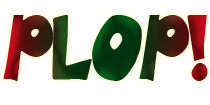
<style>
.page{position:relative;width:210px;height:105px;background:#ffffff}
.page>*{position:absolute;margin:0}
.t1{font:72px "HappyHero"}
</style>
<div class="page">
<p class="t1" style="left:3px;top:15px;width:205px;height:66px">PLOP!</p>
</div>
